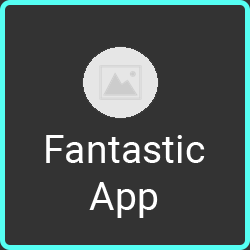
<style>
.page{position:relative;width:250px;height:250px;background:#333333}
.page>*{position:absolute;margin:0}
.t1{font:39.4px "Roboto-Regular";color:#ffffff}
</style>
<div class="page">
<p class="t1" style="left:46px;top:135px;width:159px;height:83px;text-align:center">Fantastic<br>App</p>
</div>
